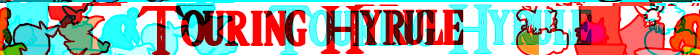
<style>
.page{position:relative;width:700px;height:55px;background:#ffffff}
.page>*{position:absolute;margin:0}
.t1{font:55px "Triforce"}
</style>
<div class="page">
<p class="t1" style="left:266px;top:4px;width:169px;height:48px">Touring</p>
<p class="t1" style="left:449px;top:3px;width:142px;height:48px">Hyrule</p>
</div>
